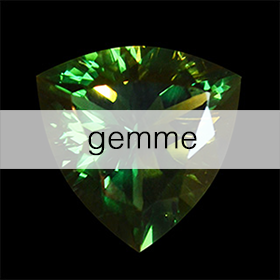
<style>
.page{position:relative;width:280px;height:280px;background:#000000}
.page>*{position:absolute;margin:0}
.t1{font:31.5px "Helvetica-Light";color:#000000;font-weight:bold}
</style>
<div class="page">
<p class="t1" style="left:88px;top:131px;width:109px;height:25px">gemme</p>
</div>
